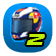
<style>
.page{position:relative;width:56px;height:56px;background:#ffffff}
.page>*{position:absolute;margin:0}
.t1{font:16px "DreamMMA";color:#baf000}
</style>
<div class="page">
<p class="t1" style="left:26px;top:34px;width:19px;height:11px">2</p>
</div>
